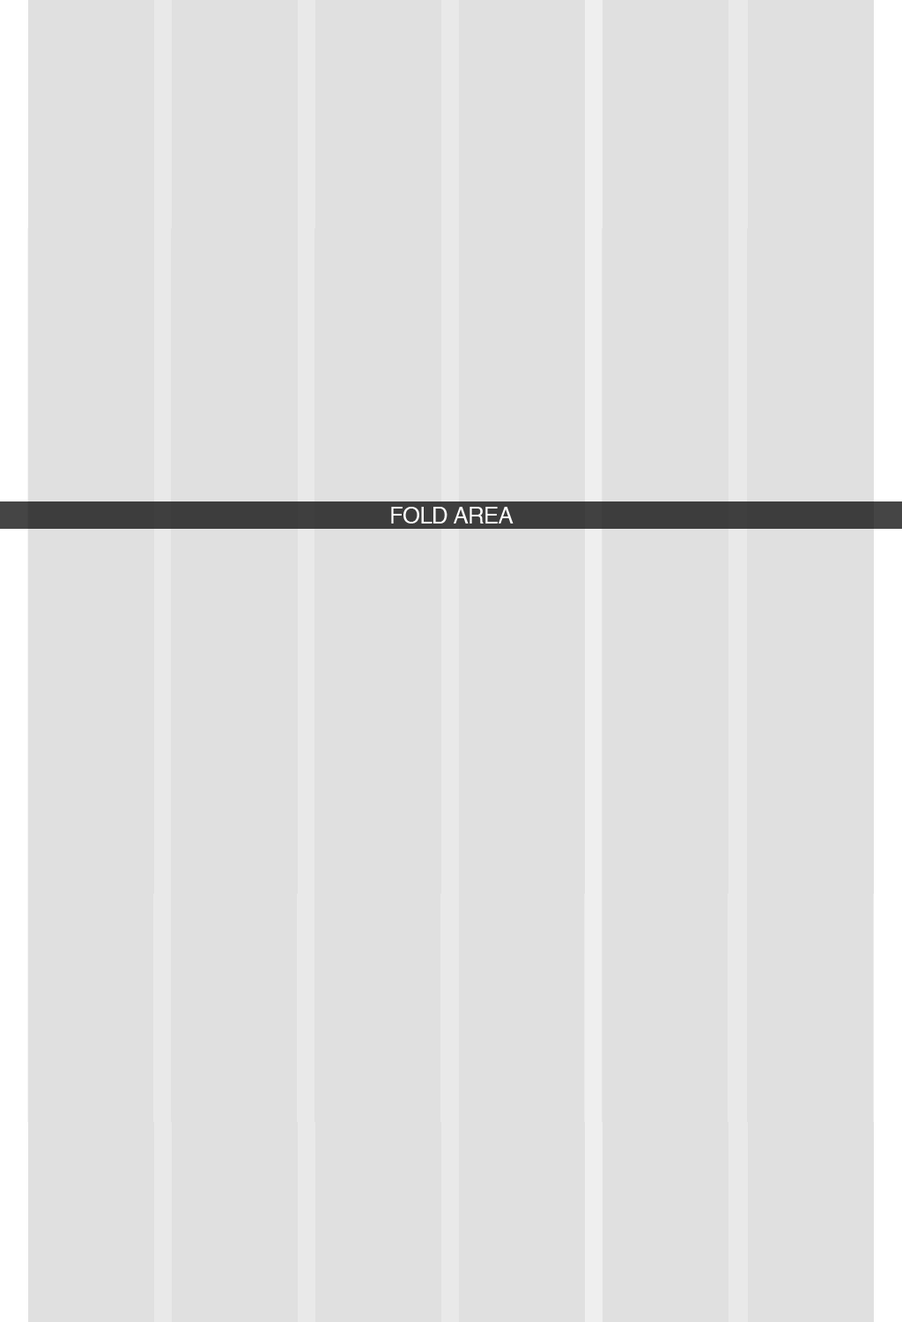
<style>
.page{position:relative;width:902px;height:1322px;background:#e0e0e0}
.page>*{position:absolute;margin:0}
.t1{font:22.7px "Helvetica";letter-spacing:-0.025em;color:#ffffff}
</style>
<div class="page">
<p class="t1" style="left:391px;top:507px;width:123px;height:16px">FOLD AREA</p>
</div>
